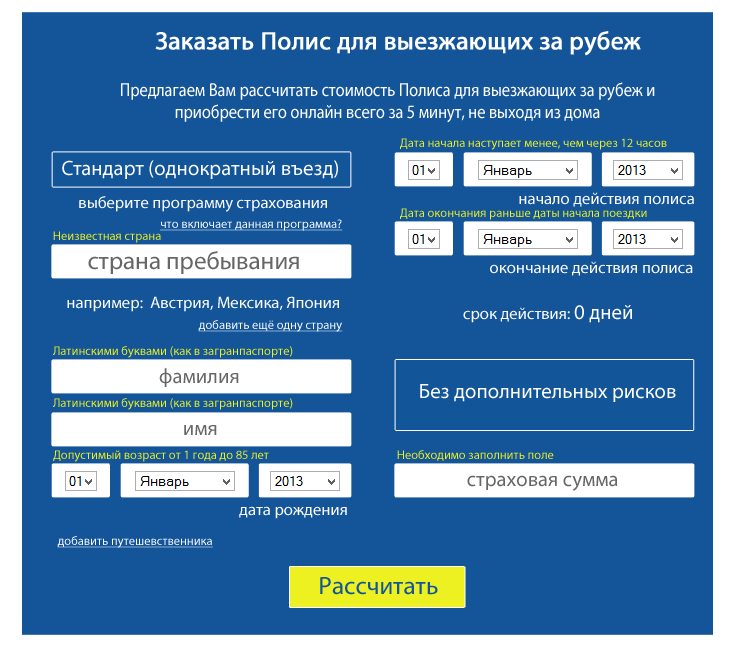
<style>
.page{position:relative;width:732px;height:648px;background:#14559a}
.page>*{position:absolute;margin:0}
.t1{font:25px "MyriadPro-Regular";color:#ffffff;font-weight:bold}
.t2{font:18.7px "MyriadPro-Regular";color:#ffffff;scale:0.87 1}
.t3{font:12.5px "MyriadPro-Regular";color:#edf121}
.t4{font:20.8px "MyriadPro-Regular";color:#ffffff}
.t5{font:16.7px "MyriadPro-Regular";color:#ffffff}
.t6{font:12.5px "MyriadPro-Regular";color:#ffffff;text-decoration:underline}
.t7{font:25px "MyriadPro-Regular";color:#666666}
.t8{font:20.8px "MyriadPro-Regular";color:#666666}
.t9{font:25px "MyriadPro-Regular";color:#135599}
</style>
<div class="page">
<p class="t1" style="left:155px;top:31px;width:486px;height:25px">Заказать Полис для выезжающих за рубеж</p>
<p class="t2" style="left:121px;top:82px;width:534px;height:41px;text-align:center">Предлагаем Вам рассчитать стоимость Полиса для выезжающих за рубеж и приобрести его онлайн всего за 5 минут, не выходя из дома</p>
<p class="t3" style="left:400px;top:138px;width:267px;height:12px">Дата начала наступает менее, чем через 12 часов</p>
<p class="t4" style="left:62px;top:160px;width:276px;height:19px">Стандарт (однократный въезд)</p>
<p class="t5" style="left:79px;top:196px;width:248px;height:16px">выберите программу страхования</p>
<p class="t5" style="left:519px;top:192px;width:175px;height:15px">начало действия полиса</p>
<p class="t3" style="left:400px;top:208px;width:247px;height:12px">Дата окончания раньше даты начала поездки</p>
<p class="t6" style="left:160px;top:219px;width:183px;height:12px">что включает данная программа?</p>
<p class="t3" style="left:53px;top:231px;width:108px;height:12px">Неизвестная страна</p>
<p class="t7" style="left:88px;top:251px;width:211px;height:23px">страна пребывания</p>
<p class="t5" style="left:490px;top:261px;width:203px;height:15px">окончание действия полиса</p>
<p class="t5" style="left:67px;top:296px;width:272px;height:16px">например:  Австрия, Мексика, Япония</p>
<p class="t5" style="left:463px;top:305px;width:169px;height:18px">срок действия: <span class="t4">0 дней</span></p>
<p class="t6" style="left:198px;top:320px;width:145px;height:12px">добавить ещё одну страну</p>
<p class="t3" style="left:53px;top:346px;width:240px;height:12px">Латинскими буквами (как в загранпаспорте)</p>
<p class="t8" style="left:159px;top:368px;width:80px;height:19px">фамилия</p>
<p class="t4" style="left:420px;top:384px;width:256px;height:18px">Без дополнительных рисков</p>
<p class="t3" style="left:53px;top:398px;width:240px;height:12px">Латинскими буквами (как в загранпаспорте)</p>
<p class="t8" style="left:184px;top:425px;width:33px;height:10px">имя</p>
<p class="t3" style="left:53px;top:450px;width:216px;height:12px">Допустимый возраст от 1 года до 85 лет</p>
<p class="t3" style="left:397px;top:450px;width:157px;height:11px">Необходимо заполнить поле</p>
<p class="t8" style="left:467px;top:475px;width:151px;height:16px">страховая сумма</p>
<p class="t5" style="left:239px;top:506px;width:108px;height:13px">дата рождения</p>
<p class="t6" style="left:57px;top:536px;width:156px;height:12px">добавить путешевственника</p>
<p class="t9" style="left:320px;top:577px;width:118px;height:18px">Рассчитать</p>
</div>
